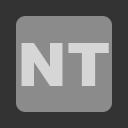
<style>
.page{position:relative;width:128px;height:128px;background:#333333}
.page>*{position:absolute;margin:0}
.t1{font:60px "Arial-Black";color:#d6d6d6}
</style>
<div class="page">
<p class="t1" style="left:21px;top:43px;width:88px;height:43px">NT</p>
</div>
